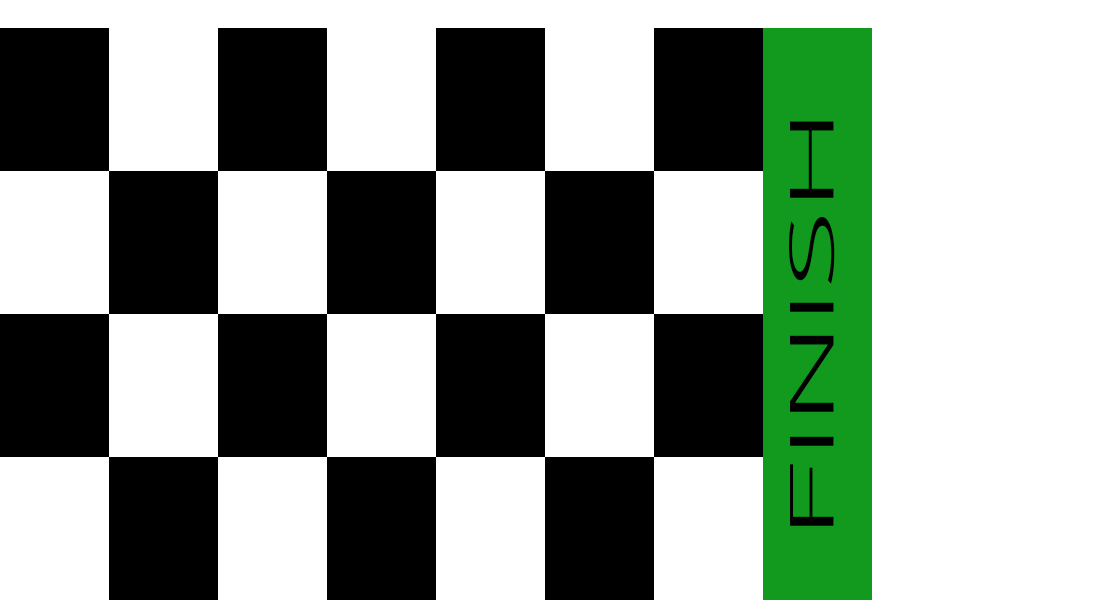
<style>
.page{position:relative;width:1100px;height:600px;background:#ffffff}
.page>*{position:absolute;margin:0}
.t1{font:91.4px "THSarabunNew";color:#000000;scale:2.5 1}
</style>
<div class="page">
<p class="t1" style="left:789px;top:121px;width:46px;height:405px;rotate:-90deg">FINISH</p>
</div>
